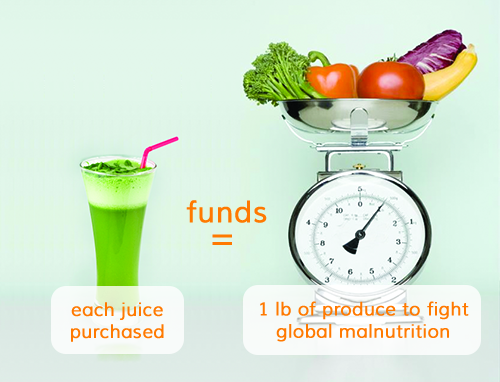
<style>
.page{position:relative;width:500px;height:382px}
.page>*{position:absolute;margin:0}
.t1{font:29.6px "Muli";color:#ff7900;font-weight:bold}
.t2{font:37px "Muli";color:#ff7900;font-weight:bold}
.t3{font:18.5px "Muli";color:#ff7900;font-weight:bold}
</style>
<div class="page">
<p class="t1" style="left:186px;top:200px;width:81px;height:23px">funds</p>
<p class="t2" style="left:212px;top:234px;width:20px;height:11px">=</p>
<p class="t3" style="left:71px;top:302px;width:93px;height:40px;text-align:center">each juice <br>purchased</p>
<p class="t3" style="left:260px;top:301px;width:209px;height:41px;text-align:center">1 lb of produce to fight global malnutrition</p>
</div>
